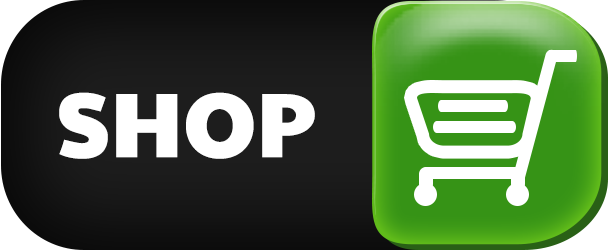
<style>
.page{position:relative;width:608px;height:251px}
.page>*{position:absolute;margin:0}
.t1{font:91.7px "PaytoneOne";color:#ffffff}
</style>
<div class="page">
<p class="t1" style="left:59px;top:92px;width:256px;height:67px">SHOP</p>
</div>
